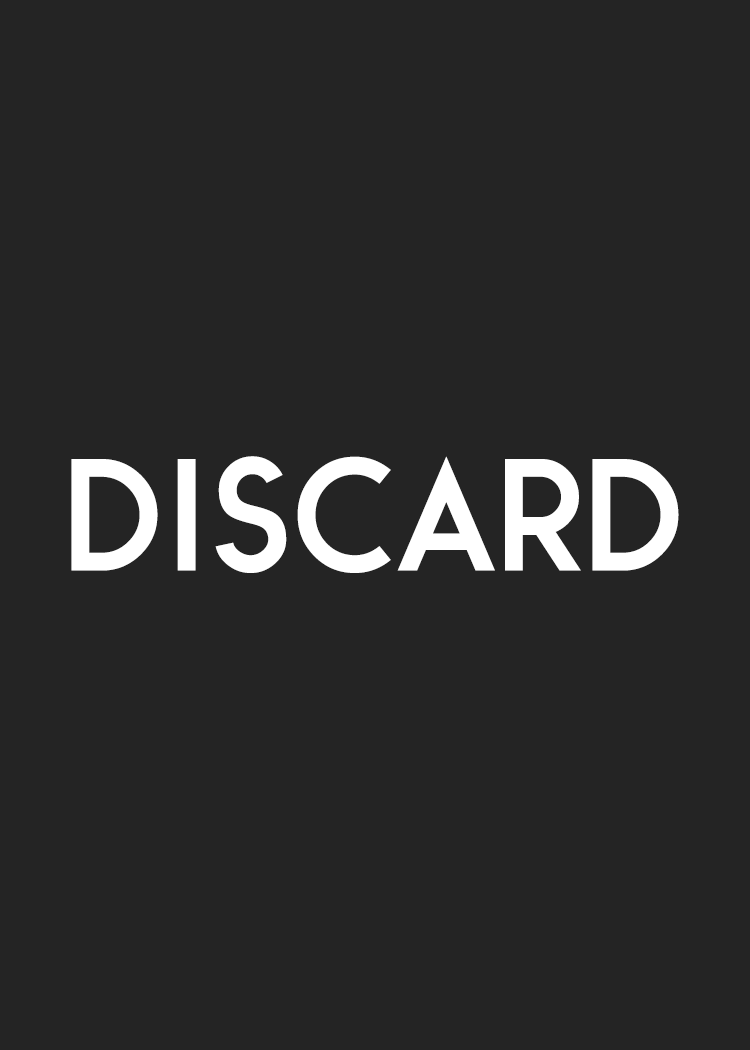
<style>
.page{position:relative;width:750px;height:1050px;background:#242424}
.page>*{position:absolute;margin:0}
.t1{font:150px "WatchwordBoldDemo";color:#ffffff}
</style>
<div class="page">
<p class="t1" style="left:71px;top:456px;width:608px;height:117px">DISCARD</p>
</div>
